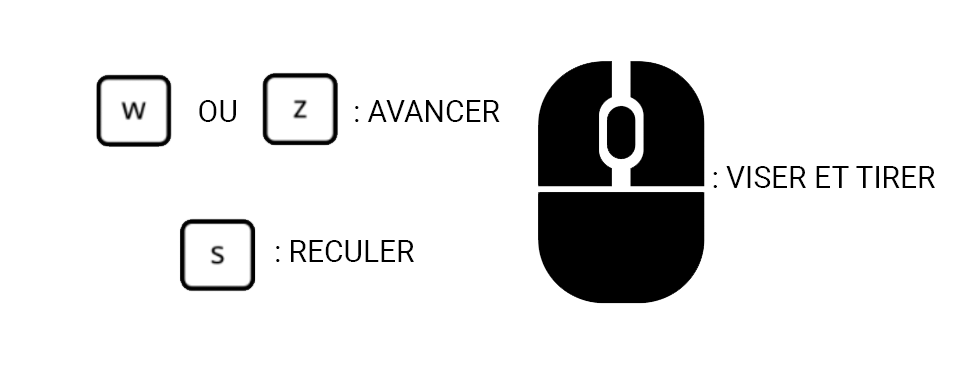
<style>
.page{position:relative;width:964px;height:388px;background:#ffffff}
.page>*{position:absolute;margin:0}
.t1{font:30px "Roboto-Regular";color:#000000}
</style>
<div class="page">
<p class="t1" style="left:199px;top:100px;width:37px;height:22px">OU</p>
<p class="t1" style="left:355px;top:100px;width:145px;height:22px">: AVANCER</p>
<p class="t1" style="left:713px;top:166px;width:222px;height:22px">: VISER ET TIRER</p>
<p class="t1" style="left:276px;top:240px;width:138px;height:22px">: RECULER</p>
</div>
